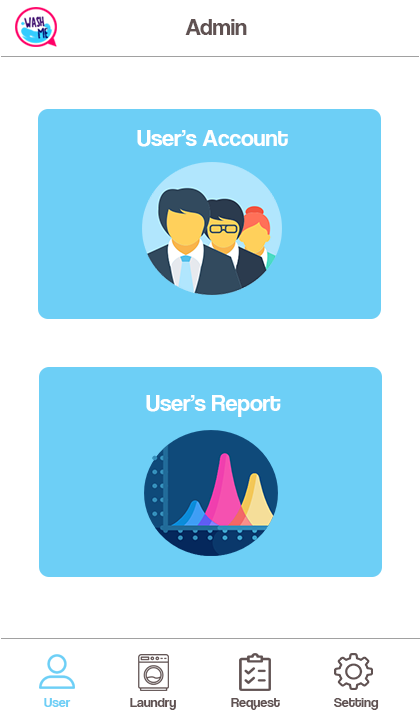
<style>
.page{position:relative;width:420px;height:720px;background:#ffffff}
.page>*{position:absolute;margin:0}
.t1{font:24px "CoolveticaRg-Regular";color:#605252}
.t2{font:24px "CoolveticaRg-Regular";color:#ffffff}
.t3{font:14px "CoolveticaRg-Regular";color:#6dcff6}
.t4{font:14px "CoolveticaRg-Regular";color:#605252}
</style>
<div class="page">
<p class="t1" style="left:185px;top:19px;width:62px;height:16px">Admin</p>
<p class="t2" style="left:137px;top:130px;width:151px;height:17px">User’s Account</p>
<p class="t2" style="left:146px;top:395px;width:135px;height:22px">User’s Report</p>
<p class="t3" style="left:44px;top:698px;width:27px;height:9px">User</p>
<p class="t4" style="left:130px;top:698px;width:46px;height:12px">Laundry</p>
<p class="t4" style="left:231px;top:698px;width:49px;height:12px">Request</p>
<p class="t4" style="left:334px;top:698px;width:45px;height:12px">Setting</p>
</div>
